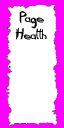
<style>
.page{position:relative;width:64px;height:128px;background:#ffffff}
.page>*{position:absolute;margin:0}
.t1{font:14px "Daubed";color:#000000}
</style>
<div class="page">
<p class="t1" style="left:15px;top:11px;width:32px;height:29px;text-align:center">Page<br>Health</p>
</div>
